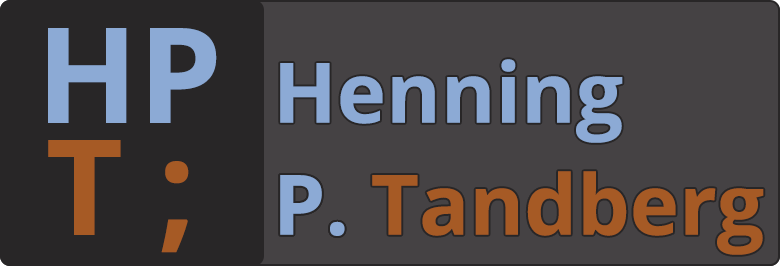
<style>
.page{position:relative;width:780px;height:266px;background:#454244}
.page>*{position:absolute;margin:0}
.t1{font:132.8px "OpenSans-Bold";color:#8caad5}
.t2{font:83.3px "OpenSans-Bold";color:#8caad5}
.t3{font:132.8px "OpenSans-Bold";color:#a65a25}
.t4{font:83.3px "OpenSans-Bold";color:#a65a25}
</style>
<div class="page">
<p class="t1" style="left:48px;top:28px;width:169px;height:95px">HP</p>
<p class="t2" style="left:280px;top:59px;width:343px;height:84px">Henning</p>
<p class="t3" style="left:48px;top:140px;width:141px;height:113px">T ;</p>
<p class="t4" style="left:280px;top:171px;width:484px;height:84px">P. Tandberg</p>
<p class="t2" style="left:280px;top:175px;width:65px;height:61px">P.</p>
</div>
